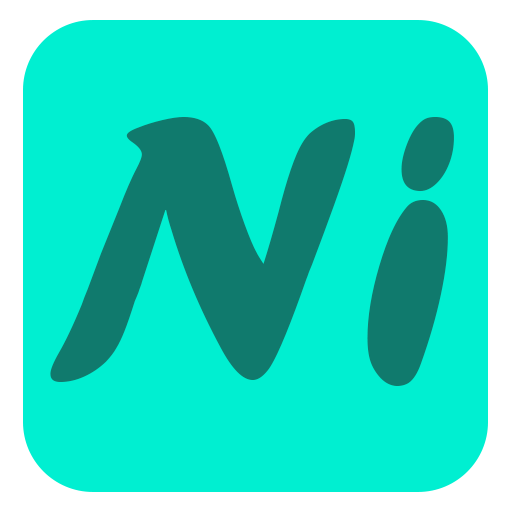
<style>
.page{position:relative;width:512px;height:512px;background:#00efd1}
.page>*{position:absolute;margin:0}
.t1{font:395.8px "ForteMT";color:#107a6d}
</style>
<div class="page">
<p class="t1" style="left:50px;top:117px;width:404px;height:269px">Ni</p>
</div>
